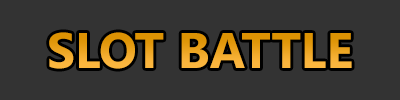
<style>
.page{position:relative;width:400px;height:100px;background:#333333}
.page>*{position:absolute;margin:0}
.t1{font:50px "NirmalaUI-Bold"}
</style>
<div class="page">
<p class="t1" style="left:49px;top:32px;width:303px;height:37px">SLOT BATTLE</p>
</div>
